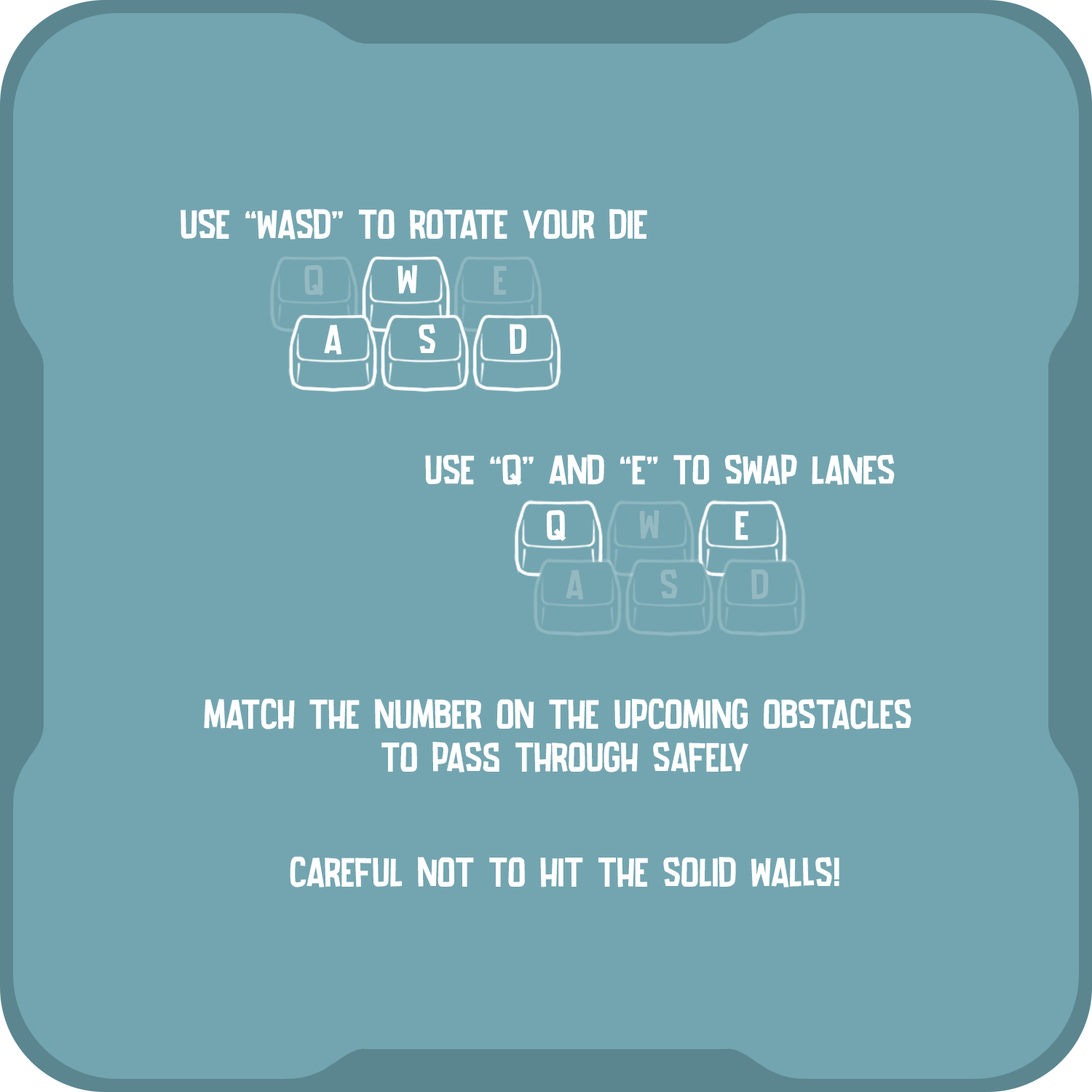
<style>
.page{position:relative;width:1092px;height:1092px;background:#73a5b0}
.page>*{position:absolute;margin:0}
.t1{font:35.8px "Want-Coffee";color:#ffffff}
.t2{font:35.8px "Want-Coffee";color:#95b9c1}
.t3{font:35.7px "Want-Coffee";color:#ffffff}
.t4{font:35.7px "Want-Coffee";color:#95b9c1}
</style>
<div class="page">
<p class="t1" style="left:181px;top:209px;width:466px;height:31px">USE “WASD” TO ROTATE YOUR DIE</p>
<p class="t2" style="left:304px;top:265px;width:20px;height:31px">Q</p>
<p class="t1" style="left:397px;top:265px;width:20px;height:29px">W</p>
<p class="t2" style="left:494px;top:266px;width:13px;height:29px">E</p>
<p class="t1" style="left:324px;top:325px;width:18px;height:30px">A</p>
<p class="t1" style="left:419px;top:324px;width:16px;height:29px">S</p>
<p class="t1" style="left:510px;top:324px;width:16px;height:30px">D</p>
<p class="t3" style="left:425px;top:454px;width:470px;height:32px">USE “Q” AND “E” TO SWAP LANES</p>
<p class="t3" style="left:547px;top:510px;width:19px;height:32px">Q</p>
<p class="t4" style="left:639px;top:510px;width:21px;height:29px">W</p>
<p class="t3" style="left:735px;top:511px;width:13px;height:29px">E</p>
<p class="t4" style="left:660px;top:569px;width:18px;height:29px">S</p>
<p class="t4" style="left:751px;top:569px;width:18px;height:30px">D</p>
<p class="t4" style="left:566px;top:570px;width:18px;height:30px">A</p>
<p class="t1" style="left:204px;top:698px;width:707px;height:74px;text-align:center">MATCH THE NUMBER ON THE UPCOMING OBSTACLES <br>TO PASS THROUGH SAFELY</p>
<p class="t1" style="left:290px;top:856px;width:549px;height:31px">CAREFUL NOT TO HIT THE SOLID WALLS!</p>
</div>
